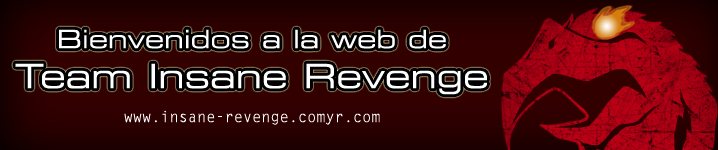
<style>
.page{position:relative;width:718px;height:150px}
.page>*{position:absolute;margin:0}
.t1{font:25px "ESL-eSport-Ext-Light";color:#ffffff}
.t2{font:33.3px "ESL-eSport-Ext-Light";color:#ffffff}
.t3{font:15.3px "LetterGothicStd";color:#ffffff}
</style>
<div class="page">
<p class="t1" style="left:15px;top:29px;width:472px;height:66px;text-align:center">Bienvenidos a la web de<br><span class="t2">Team Insane Revenge</span></p>
<p class="t3" style="left:124px;top:110px;width:256px;height:15px">www.insane-revenge.comyr.com</p>
</div>
